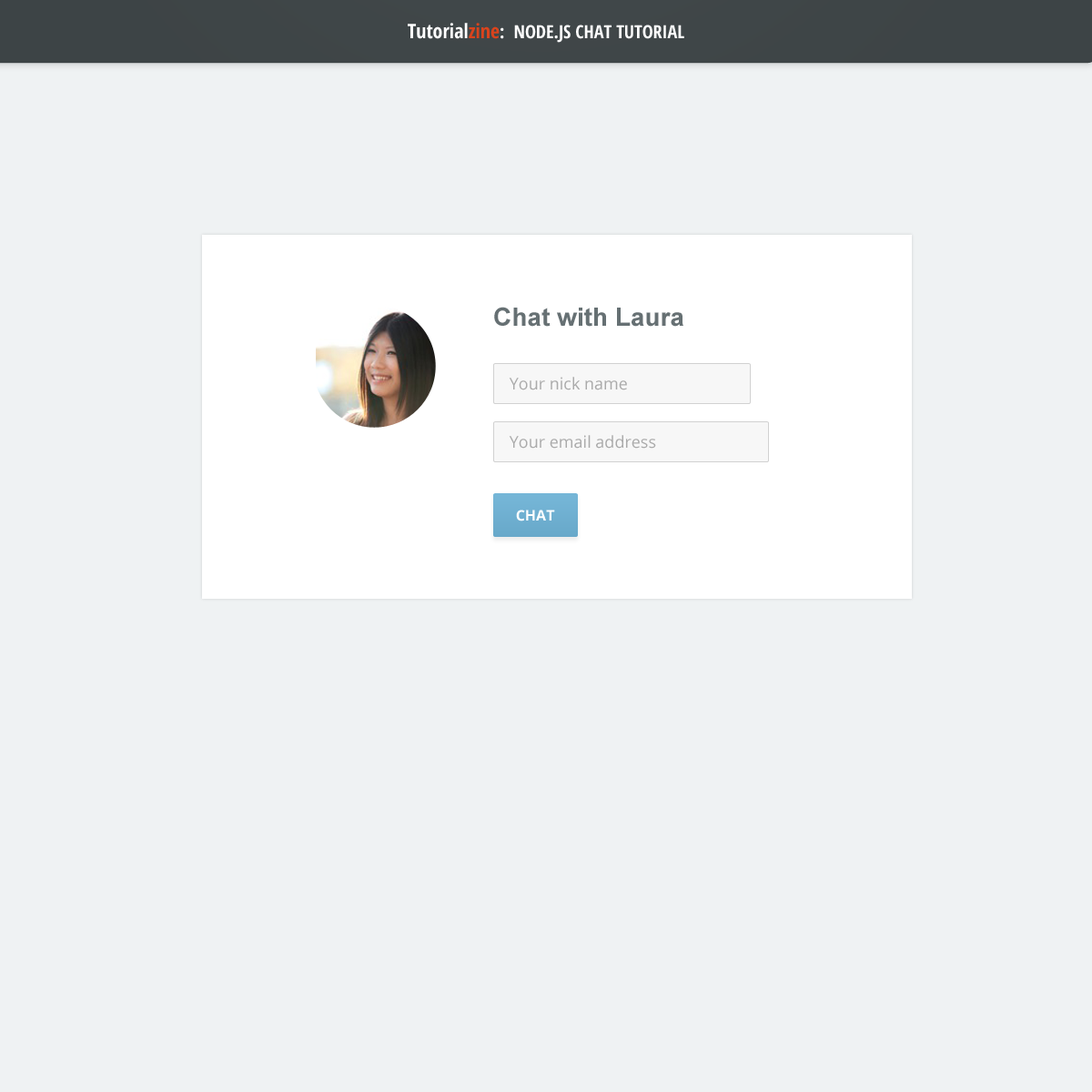
<style>
.page{position:relative;width:1092px;height:1092px;background:#eff2f3}
.page>*{position:absolute;margin:0}
.t1{font:18.2px "OpenSans-CondensedBold";color:#fefefe;text-transform:uppercase}
.t2{font:20px "OpenSans-CondensedBold";color:#ffffff}
.t3{font:20px "OpenSans-CondensedBold";color:#da431c}
.t4{font:18.2px "OpenSans-CondensedBold";color:#ffffff}
.t5{font:25.5px "Arial-BoldMT";color:#667073}
.t6{font:16.4px "OpenSans";color:#aaaaaa}
.t7{font:14.6px "OpenSans-Bold";color:#ffffff;text-transform:uppercase}
</style>
<div class="page">
<p class="t1" style="left:408px;top:23px;width:276px;height:20px"><span class="t2">Tutorial</span><span class="t3">zine</span><span class="t4">:  </span>Node.js Chat Tutorial</p>
<p class="t5" style="left:494px;top:307px;width:189px;height:20px">Chat with Laura</p>
<p class="t6" style="left:509px;top:377px;width:118px;height:13px">Your nick name</p>
<p class="t6" style="left:509px;top:435px;width:147px;height:14px">Your email address</p>
<p class="t7" style="left:516px;top:510px;width:39px;height:11px">chat</p>
</div>
